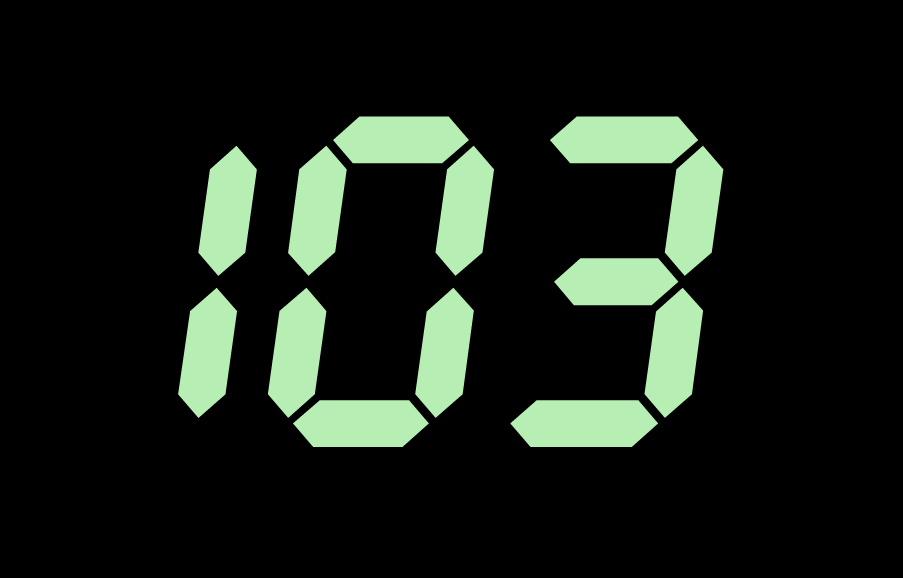
<style>
.page{position:relative;width:903px;height:578px;background:#000000}
.page>*{position:absolute;margin:0}
.t1{font:413px "MouseLED2U";color:#b6eeb3}
</style>
<div class="page">
<p class="t1" style="left:178px;top:116px;width:546px;height:331px">103</p>
</div>
